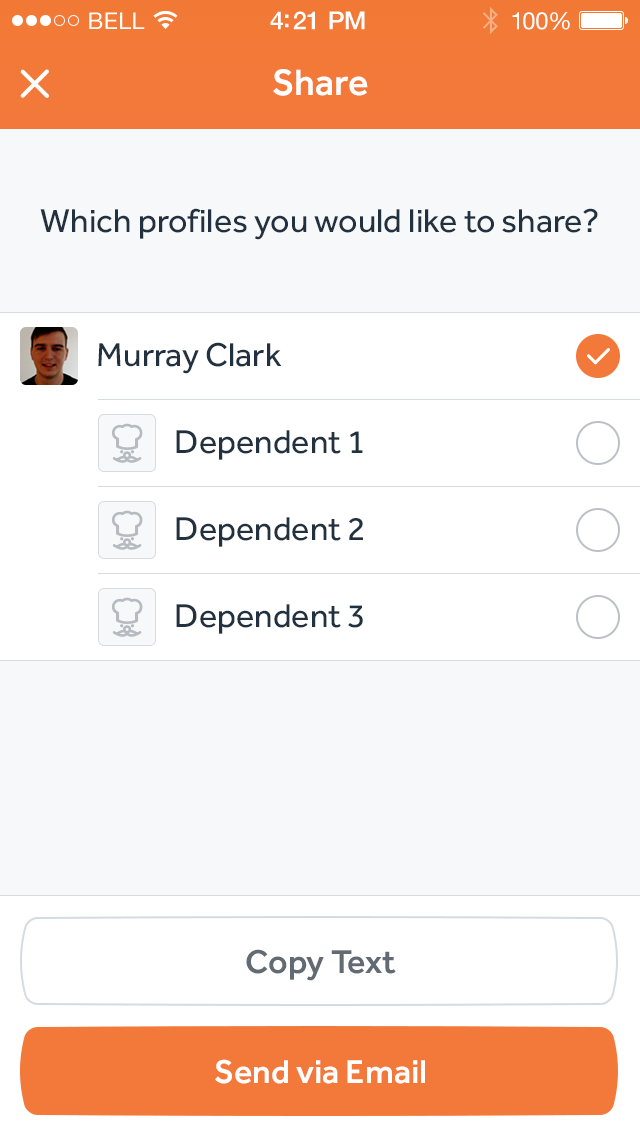
<style>
.page{position:relative;width:640px;height:1136px;background:#ffffff}
.page>*{position:absolute;margin:0}
.t1{font:23px "HelveticaNeue";letter-spacing:0.02em;color:#ffffff}
.t2{font:25px "HelveticaNeue-Medium";letter-spacing:-0.02em;color:#ffffff}
.t3{font:24px "HelveticaNeue";letter-spacing:-0.02em;color:#ffffff}
.t4{font:38px "Effra-Medium";color:#ffffff}
.t5{font:34px "Effra-Regular";color:#22313f}
.t6{font:34px "Effra-Medium";color:#626a73}
.t7{font:34px "Effra-Medium";color:#ffffff}
</style>
<div class="page">
<p class="t1" style="left:89px;top:12px;width:56px;height:17px">BELL</p>
<p class="t2" style="left:270px;top:11px;width:95px;height:19px">4:21 PM</p>
<p class="t3" style="left:512px;top:12px;width:58px;height:18px">100%</p>
<p class="t4" style="left:273px;top:69px;width:95px;height:27px">Share</p>
<p class="t5" style="left:40px;top:208px;width:558px;height:32px">Which profiles you would like to share?</p>
<p class="t5" style="left:98px;top:342px;width:184px;height:32px">Murray Clark</p>
<p class="t5" style="left:176px;top:430px;width:187px;height:30px">Dependent 1</p>
<p class="t5" style="left:176px;top:517px;width:187px;height:30px">Dependent 2</p>
<p class="t5" style="left:176px;top:604px;width:187px;height:30px">Dependent 3</p>
<p class="t6" style="left:246px;top:949px;width:150px;height:32px">Copy Text</p>
<p class="t7" style="left:215px;top:1059px;width:210px;height:25px">Send via Email</p>
</div>
